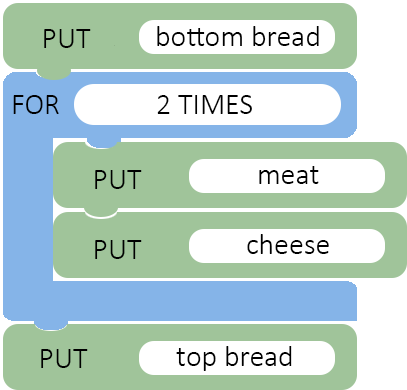
<style>
.page{position:relative;width:407px;height:390px;background:#a0c49a}
.page>*{position:absolute;margin:0}
.t1{font:30px "Calibri-Light";color:#000000}
</style>
<div class="page">
<p class="t1" style="left:44px;top:29px;width:47px;height:19px">PUT</p>
<p class="t1" style="left:157px;top:26px;width:162px;height:20px">bottom bread</p>
<p class="t1" style="left:13px;top:95px;width:46px;height:19px">FOR</p>
<p class="t1" style="left:157px;top:95px;width:95px;height:19px">2 TIMES</p>
<p class="t1" style="left:95px;top:170px;width:47px;height:19px">PUT</p>
<p class="t1" style="left:259px;top:166px;width:60px;height:18px">meat</p>
<p class="t1" style="left:95px;top:240px;width:47px;height:19px">PUT</p>
<p class="t1" style="left:247px;top:234px;width:82px;height:20px">cheese</p>
<p class="t1" style="left:41px;top:349px;width:47px;height:19px">PUT</p>
<p class="t1" style="left:176px;top:346px;width:116px;height:25px">top bread</p>
</div>
